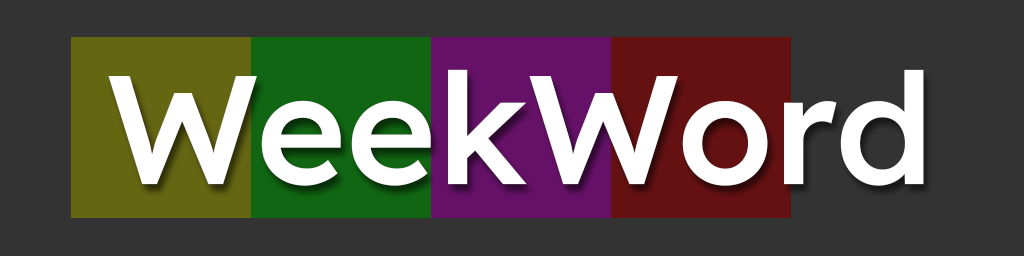
<style>
.page{position:relative;width:1024px;height:256px;background:#333333}
.page>*{position:absolute;margin:0}
.t1{font:154.2px "LexendDeca-Medium";color:#ffffff}
</style>
<div class="page">
<p class="t1" style="left:108px;top:69px;width:816px;height:117px">WeekWord</p>
</div>
